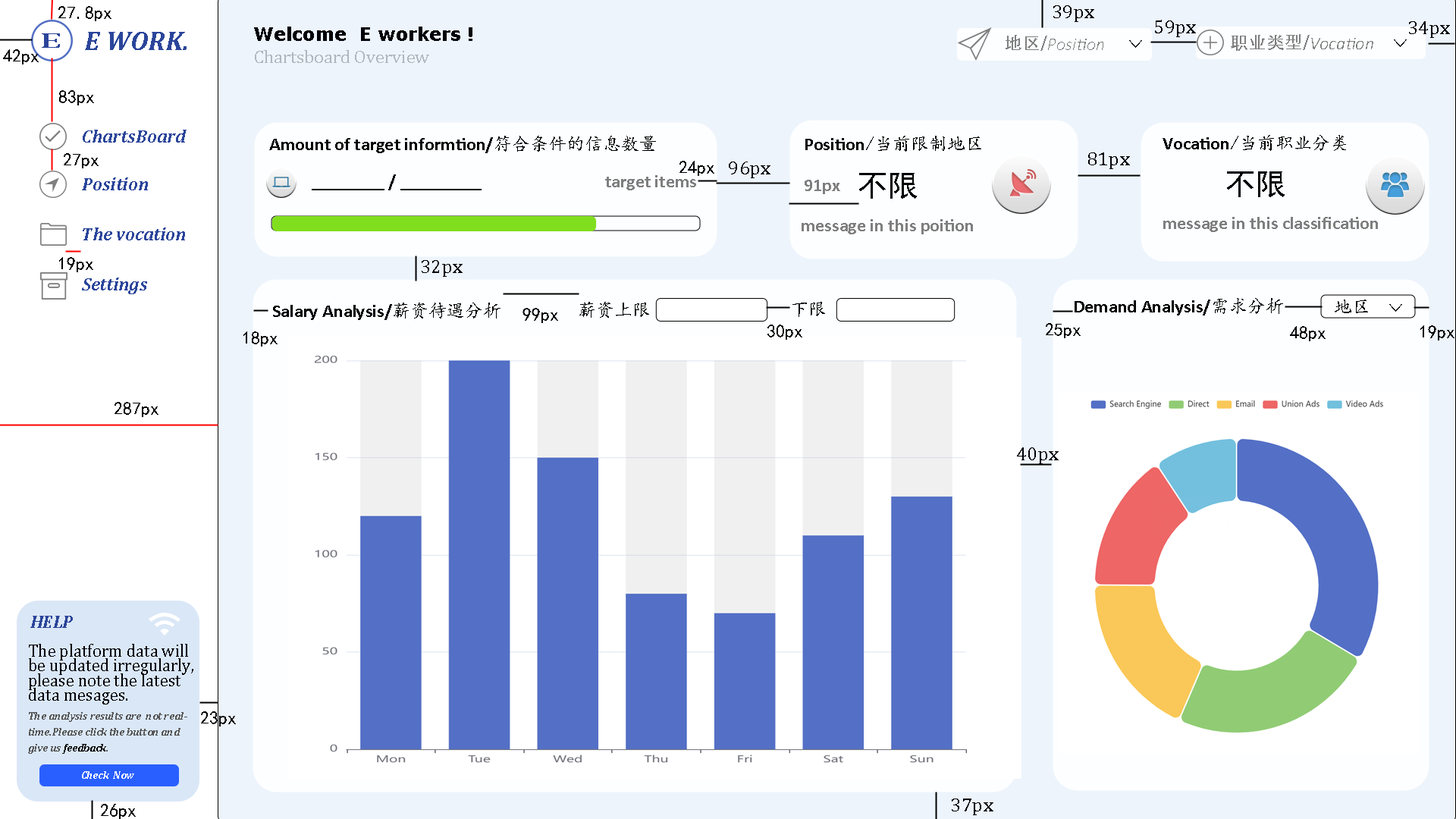
<style>
.page{position:relative;width:1456px;height:819px;background:#ffffff}
.page>*{position:absolute;margin:0}
.t1{font:19.8px "CambriaMath";color:#000007}
.t2{font:18.2px "KaiTi";color:#000000}
.t3{font:18.2px "Verdana-Bold";color:#000007}
.t4{font:21.1px "Cambria";color:#2b459a;scale:1.92 1}
.t5{font:27px "Cambria-BoldItalic";color:#2b459a}
.t6{font:18.2px "Calibri-LightItalic";color:#7f7f7f}
.t7{font:18.2px "AdobeHeitiStd-Regular";color:#7f7f7f}
.t8{font:18.2px "CambriaMath";color:#b0b7bf}
.t9{font:18.2px "Cambria-BoldItalic";color:#2b459a}
.t10{font:18.2px "Calibri-Bold";color:#000000}
.t11{font:30.3px "SimHei";color:#000000}
.t12{font:18.2px "Calibri-Bold";color:#7f7f7f}
.t13{font:18.2px/14.7px "CambriaMath";color:#000007;scale:0.93 1}
.t14{font:10.6px/15.9px "Cambria-BoldItalic";color:#545454}
.t15{font:10.6px/15.9px "Cambria-BoldItalic";color:#000000}
.t16{font:10.6px "Cambria-BoldItalic";color:#ffffff}
</style>
<div class="page">
<p class="t1" style="left:1053px;top:5px;width:41px;height:17px">39px</p>
<p class="t2" style="left:58px;top:6px;width:53px;height:15px">27.8px</p>
<p class="t3" style="left:254px;top:27px;width:218px;height:14px">Welcome  E workers !</p>
<p class="t1" style="left:1155px;top:20px;width:41px;height:17px">59px</p>
<p class="t1" style="left:1409px;top:21px;width:41px;height:17px">34px</p>
<p class="t4" style="left:42px;top:33px;width:18px;height:15px">E</p>
<p class="t5" style="left:85px;top:32px;width:102px;height:18px">E WORK.</p>
<p class="t6" style="left:1006px;top:35px;width:97px;height:16px"><span class="t7">地区/</span>Position</p>
<p class="t2" style="left:1129px;top:40px;width:13px;height:8px">&gt;</p>
<p class="t6" style="left:1231px;top:34px;width:142px;height:17px"><span class="t7">职业类型/</span>Vocation</p>
<p class="t2" style="left:1394px;top:39px;width:13px;height:8px">&gt;</p>
<p class="t2" style="left:3px;top:49px;width:36px;height:15px">42px</p>
<p class="t8" style="left:255px;top:50px;width:174px;height:13px">Chartsboard Overview</p>
<p class="t2" style="left:59px;top:90px;width:35px;height:15px">83px</p>
<p class="t9" style="left:83px;top:130px;width:104px;height:13px">ChartsBoard</p>
<p class="t10" style="left:269px;top:136px;width:387px;height:17px">Amount of target informtion/<span class="t2">符合条件的信息数量</span></p>
<p class="t10" style="left:805px;top:136px;width:176px;height:16px">Position<span class="t2">/当前限制地区</span></p>
<p class="t10" style="left:1163px;top:135px;width:183px;height:16px">Vocation<span class="t2">/当前职业分类</span></p>
<p class="t2" style="left:64px;top:153px;width:35px;height:15px">27px</p>
<p class="t2" style="left:679px;top:161px;width:35px;height:15px">24px</p>
<p class="t1" style="left:729px;top:162px;width:41px;height:16px">96px</p>
<p class="t1" style="left:1088px;top:152px;width:42px;height:17px">81px</p>
<p class="t11" style="left:859px;top:173px;width:58px;height:26px">不限</p>
<p class="t11" style="left:1227px;top:171px;width:58px;height:26px">不限</p>
<p class="t9" style="left:82px;top:177px;width:66px;height:13px">Position</p>
<p class="t10" style="left:312px;top:174px;width:170px;height:16px">________ / _________</p>
<p class="t12" style="left:605px;top:175px;width:91px;height:15px">target items</p>
<p class="t12" style="left:805px;top:180px;width:35px;height:14px">91px</p>
<p class="t12" style="left:802px;top:219px;width:171px;height:15px">message in this poition</p>
<p class="t12" style="left:1163px;top:217px;width:215px;height:15px">message in this classification</p>
<p class="t9" style="left:83px;top:227px;width:102px;height:13px">The vocation</p>
<p class="t2" style="left:59px;top:257px;width:34px;height:15px">19px</p>
<p class="t1" style="left:422px;top:260px;width:41px;height:17px">32px</p>
<p class="t9" style="left:82px;top:278px;width:65px;height:16px">Settings</p>
<p class="t10" style="left:273px;top:303px;width:227px;height:17px">Salary Analysis/<span class="t2">薪资待遇分析</span></p>
<p class="t2" style="left:579px;top:302px;width:70px;height:16px">薪资上限</p>
<p class="t2" style="left:792px;top:302px;width:33px;height:15px">下限</p>
<p class="t10" style="left:1075px;top:298px;width:208px;height:17px">Demand Analysis/<span class="t2">需求分析</span></p>
<p class="t2" style="left:1335px;top:300px;width:33px;height:13px">地区</p>
<p class="t2" style="left:1389px;top:304px;width:13px;height:8px">&gt;</p>
<p class="t2" style="left:522px;top:308px;width:36px;height:15px">99px</p>
<p class="t2" style="left:767px;top:325px;width:35px;height:15px">30px</p>
<p class="t2" style="left:1046px;top:323px;width:35px;height:15px">25px</p>
<p class="t2" style="left:1290px;top:326px;width:36px;height:15px">48px</p>
<p class="t2" style="left:1420px;top:325px;width:34px;height:15px">19px</p>
<p class="t2" style="left:243px;top:331px;width:35px;height:16px">18px</p>
<p class="t2" style="left:115px;top:402px;width:43px;height:15px">287px</p>
<p class="t1" style="left:1017px;top:447px;width:42px;height:17px">40px</p>
<p class="t9" style="left:30px;top:616px;width:43px;height:12px">HELP</p>
<p class="t13" style="left:29px;top:644px;width:164px;height:60px">The platform data will<br>be updated irregularly,<br>please note the latest <br>data mesages.</p>
<p class="t14" style="left:28px;top:712px;width:159px;height:42px">The analysis results are  not real-<br>time.Please click the button and <br>give us <span class="t15">feedback</span>.</p>
<p class="t2" style="left:201px;top:711px;width:35px;height:15px">23px</p>
<p class="t16" style="left:82px;top:771px;width:52px;height:8px">Check  Now</p>
<p class="t2" style="left:101px;top:804px;width:35px;height:15px">26px</p>
<p class="t1" style="left:952px;top:799px;width:41px;height:16px">37px</p>
</div>
